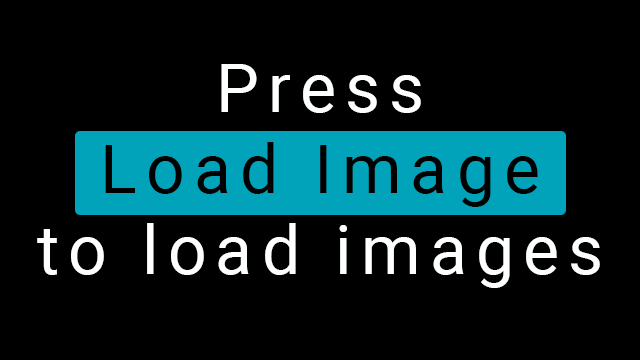
<style>
.page{position:relative;width:640px;height:360px;background:#000000}
.page>*{position:absolute;margin:0}
.t1{font:67.5px "Roboto-Regular";letter-spacing:0.14em;color:#feffff}
.t2{font:67.5px "Roboto-Regular";letter-spacing:0.14em;color:#000000}
</style>
<div class="page">
<p class="t1" style="left:37px;top:64px;width:563px;height:224px;text-align:center">Press<br><span class="t2">Load Image<br></span>to load images</p>
</div>
